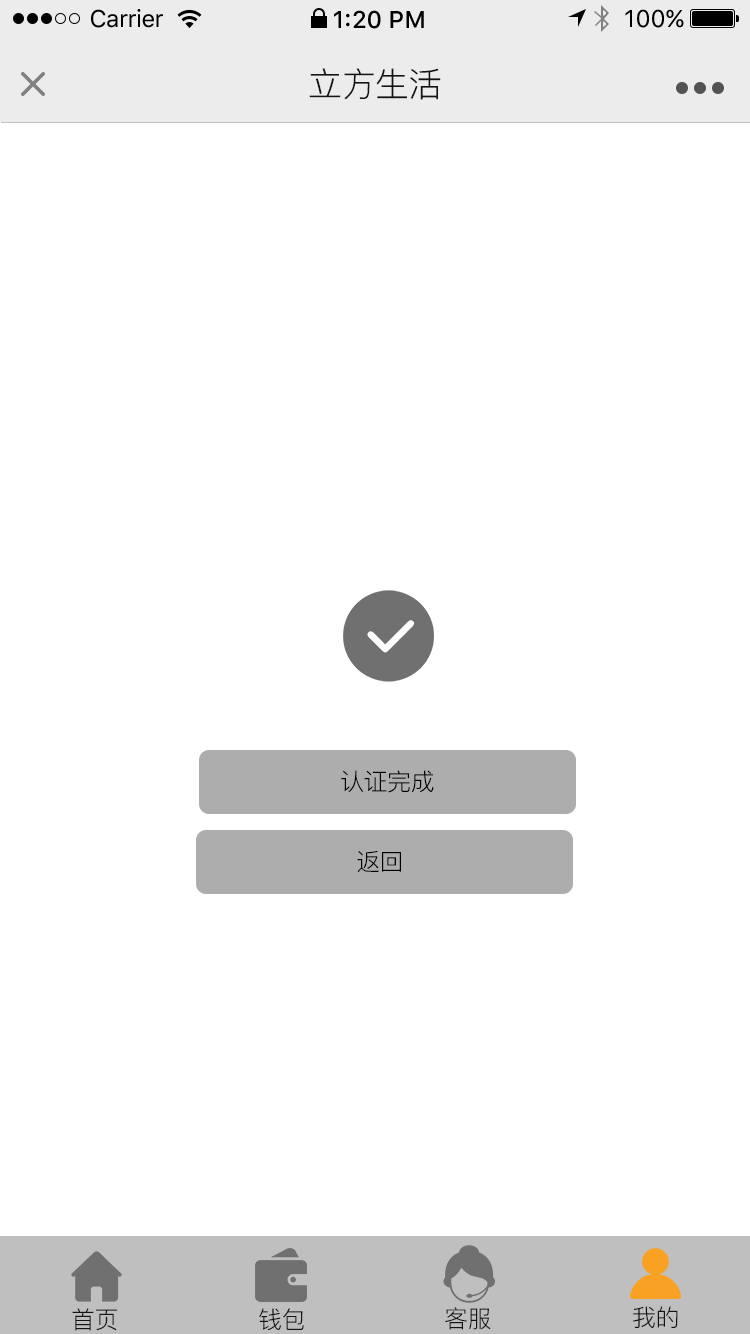
<style>
.page{position:relative;width:750px;height:1334px;background:#ffffff}
.page>*{position:absolute;margin:0}
.t1{font:24px "SFUIText-Regular";letter-spacing:-0.025em;color:#000000}
.t2{font:24px "SFUIText-Medium";color:#000000}
.t3{font:24px "SFUIText-Regular";color:#000000}
.t4{font:34px "PingFang-SC-Regular";letter-spacing:-0.02em;color:#141414}
.t5{font:24px "PingFang-SC-Regular";letter-spacing:-0.02em;color:#000000}
.t6{font:24px "PingFang-SC-Regular";letter-spacing:-0.02em;color:#141414}
</style>
<div class="page">
<p class="t1" style="left:91px;top:9px;width:72px;height:19px">Carrier</p>
<p class="t2" style="left:334px;top:10px;width:90px;height:19px">1:20 PM</p>
<p class="t3" style="left:625px;top:9px;width:59px;height:19px">100%</p>
<p class="t4" style="left:309px;top:68px;width:132px;height:32px">立方生活</p>
<p class="t5" style="left:341px;top:770px;width:93px;height:23px">认证完成</p>
<p class="t5" style="left:357px;top:850px;width:44px;height:23px">返回</p>
<p class="t6" style="left:72px;top:1308px;width:45px;height:23px">首页</p>
<p class="t6" style="left:259px;top:1308px;width:45px;height:23px">钱包</p>
<p class="t6" style="left:445px;top:1307px;width:46px;height:23px">客服</p>
<p class="t6" style="left:633px;top:1306px;width:45px;height:22px">我的</p>
</div>
